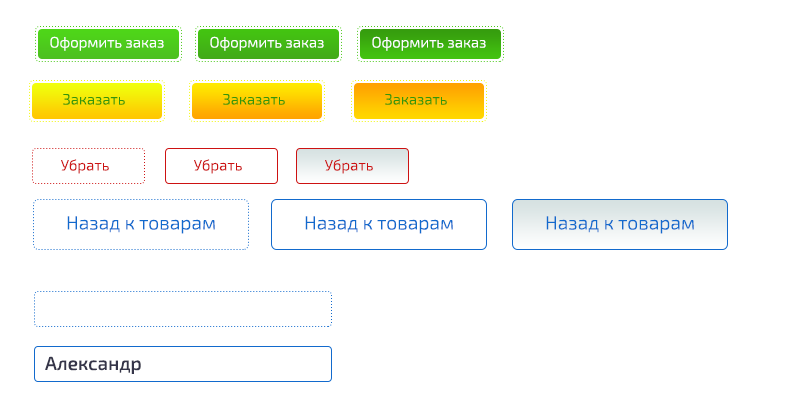
<style>
.page{position:relative;width:800px;height:414px;background:#ffffff}
.page>*{position:absolute;margin:0}
.t1{font:15px "Exo2-Light";color:#ffffff}
.t2{font:15px "Exo2-Light";color:#33960c}
.t3{font:15px "Exo2-Light";color:#cd1212}
.t4{font:19px "Exo2-Light";color:#126acd}
.t5{font:19px "Exo2-Medium";color:#353549}
</style>
<div class="page">
<p class="t1" style="left:50px;top:36px;width:114px;height:15px">Оформить заказ</p>
<p class="t1" style="left:210px;top:36px;width:114px;height:15px">Оформить заказ</p>
<p class="t1" style="left:372px;top:36px;width:114px;height:15px">Оформить заказ</p>
<p class="t2" style="left:63px;top:94px;width:62px;height:11px">Заказать</p>
<p class="t2" style="left:223px;top:94px;width:62px;height:11px">Заказать</p>
<p class="t2" style="left:385px;top:94px;width:62px;height:11px">Заказать</p>
<p class="t3" style="left:61px;top:159px;width:48px;height:15px">Убрать</p>
<p class="t3" style="left:194px;top:159px;width:48px;height:15px">Убрать</p>
<p class="t3" style="left:325px;top:159px;width:48px;height:15px">Убрать</p>
<p class="t4" style="left:67px;top:216px;width:148px;height:18px">Назад к товарам</p>
<p class="t4" style="left:305px;top:216px;width:148px;height:18px">Назад к товарам</p>
<p class="t4" style="left:546px;top:216px;width:148px;height:18px">Назад к товарам</p>
<p class="t5" style="left:45px;top:356px;width:96px;height:18px">Александр</p>
</div>
